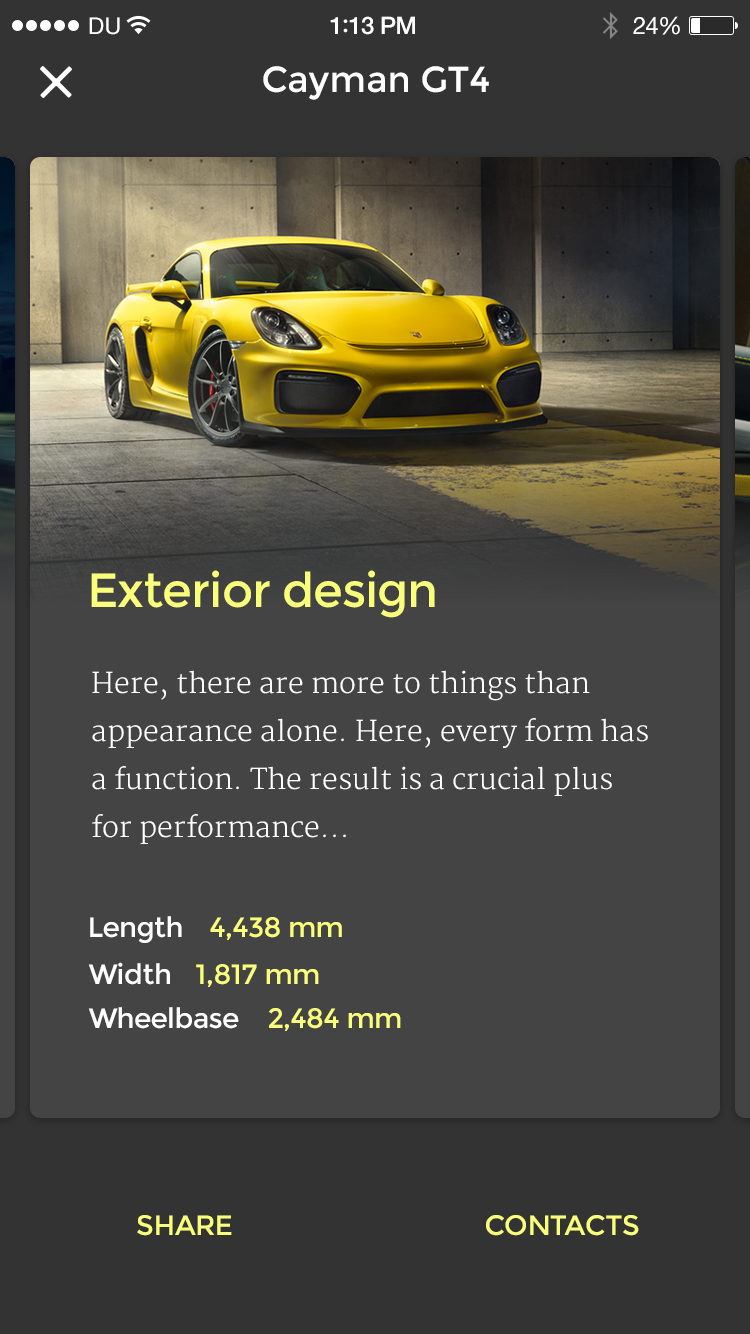
<style>
.page{position:relative;width:750px;height:1334px;background:#444444}
.page>*{position:absolute;margin:0}
.t1{font:23px "HelveticaNeue";letter-spacing:0.02em;color:#ffffff}
.t2{font:24px "HelveticaNeue-Medium";letter-spacing:-0.02em;color:#ffffff}
.t3{font:26px "Avenir-Medium";letter-spacing:-0.02em;color:#ffffff}
.t4{font:24px "HelveticaNeue";letter-spacing:-0.02em;color:#ffffff}
.t5{font:36px "Montserrat-Regular";color:#ffffff}
.t6{font:48px "Montserrat-Regular";letter-spacing:-0.02em;color:#faff7b}
.t7{font:28px/48px "Merriweather-Light";color:#ffffff}
.t8{font:28px "Montserrat-Regular";letter-spacing:-0.02em;color:#faff7b}
.t9{font:28px "Montserrat-Regular";letter-spacing:-0.02em;color:#ffffff}
.t10{font:28px "Montserrat-Regular";letter-spacing:-0.02em;color:#faff7b;text-transform:uppercase}
</style>
<div class="page">
<p class="t1" style="left:89px;top:17px;width:31px;height:18px">DU</p>
<p class="t2" style="left:330px;top:16px;width:85px;height:19px">1<span class="t3">:</span>13 PM</p>
<p class="t4" style="left:633px;top:16px;width:47px;height:19px">24%</p>
<p class="t5" style="left:263px;top:66px;width:226px;height:34px">Cayman GT4</p>
<p class="t6" style="left:91px;top:570px;width:344px;height:48px">Exterior design</p>
<p class="t7" style="left:92px;top:670px;width:556px;height:174px">Here, there are more to things than appearance alone. Here, every form has a function. The result is a crucial plus for performance...</p>
<p class="t8" style="left:90px;top:916px;width:252px;height:27px"><span class="t9">Length   </span>4,438 mm</p>
<p class="t8" style="left:88px;top:962px;width:231px;height:25px"><span class="t9">Width </span>1,817 mm</p>
<p class="t9" style="left:88px;top:1007px;width:313px;height:24px">Wheelbase <span class="t8">2,484 mm</span></p>
<p class="t10" style="left:137px;top:1215px;width:95px;height:21px">Share</p>
<p class="t10" style="left:486px;top:1215px;width:153px;height:21px">contacts</p>
</div>
